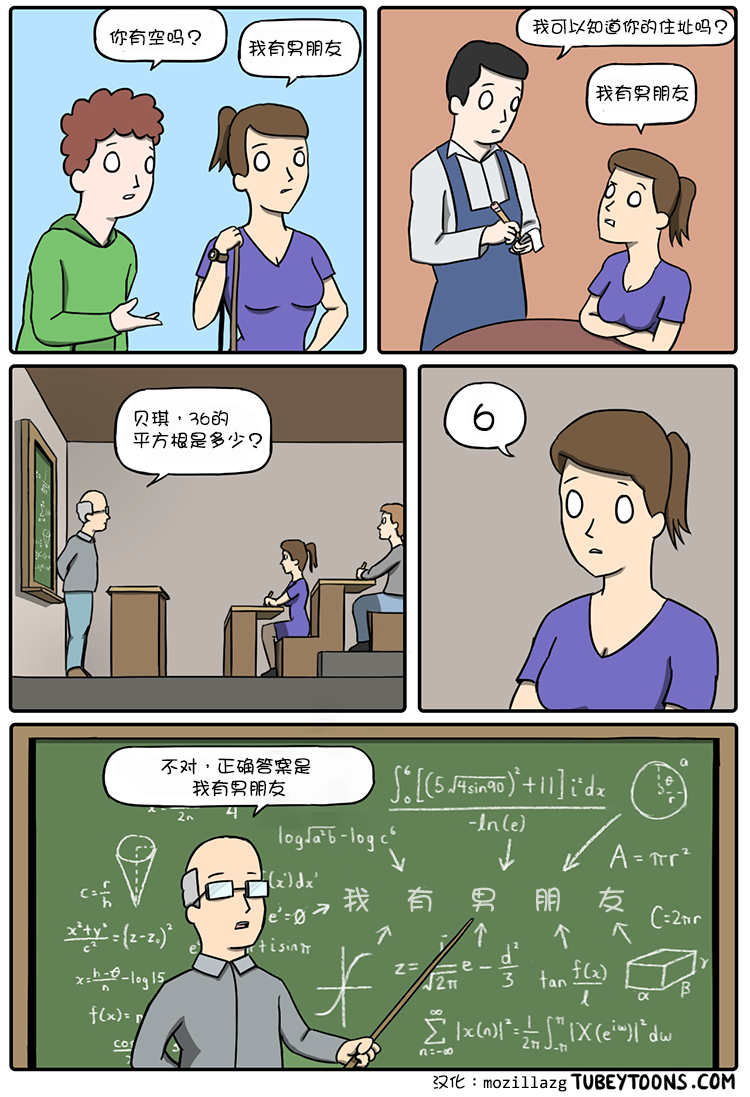
<style>
.page{position:relative;width:750px;height:1097px}
.page>*{position:absolute;margin:0}
.t1{font:19px "DFGirl";color:#000000}
.t2{font:18px "DFGirl";color:#000000}
.t3{font:19px/22px "DFGirl";color:#000000}
.t4{font:42px "DFGirl";color:#000000}
.t5{font:29px "DFGirl";letter-spacing:1.2em;color:#d2dbce}
.t6{font:17px "YaHei-Consolas-Hybrid";color:#000000}
.t7{font:17px "DFGirl";color:#000000}
</style>
<div class="page">
<p class="t1" style="left:109px;top:28px;width:92px;height:18px">你有空吗？</p>
<p class="t2" style="left:532px;top:18px;width:196px;height:17px">我可以知道你的住址吗？</p>
<p class="t1" style="left:248px;top:39px;width:94px;height:18px">我有男朋友</p>
<p class="t1" style="left:595px;top:84px;width:94px;height:18px">我有男朋友</p>
<p class="t3" style="left:133px;top:410px;width:129px;height:39px">贝琪，36的<br>平方根是多少？</p>
<p class="t4" style="left:473px;top:403px;width:22px;height:28px">6</p>
<p class="t3" style="left:161px;top:757px;width:150px;height:40px">不对，正确答案是<br>     我有男朋友</p>
<p class="t5" style="left:343px;top:886px;width:282px;height:27px">我有男朋友</p>
<p class="t6" style="left:433px;top:1074px;width:134px;height:18px"><span class="t7">汉化：</span>mozillazg</p>
</div>
